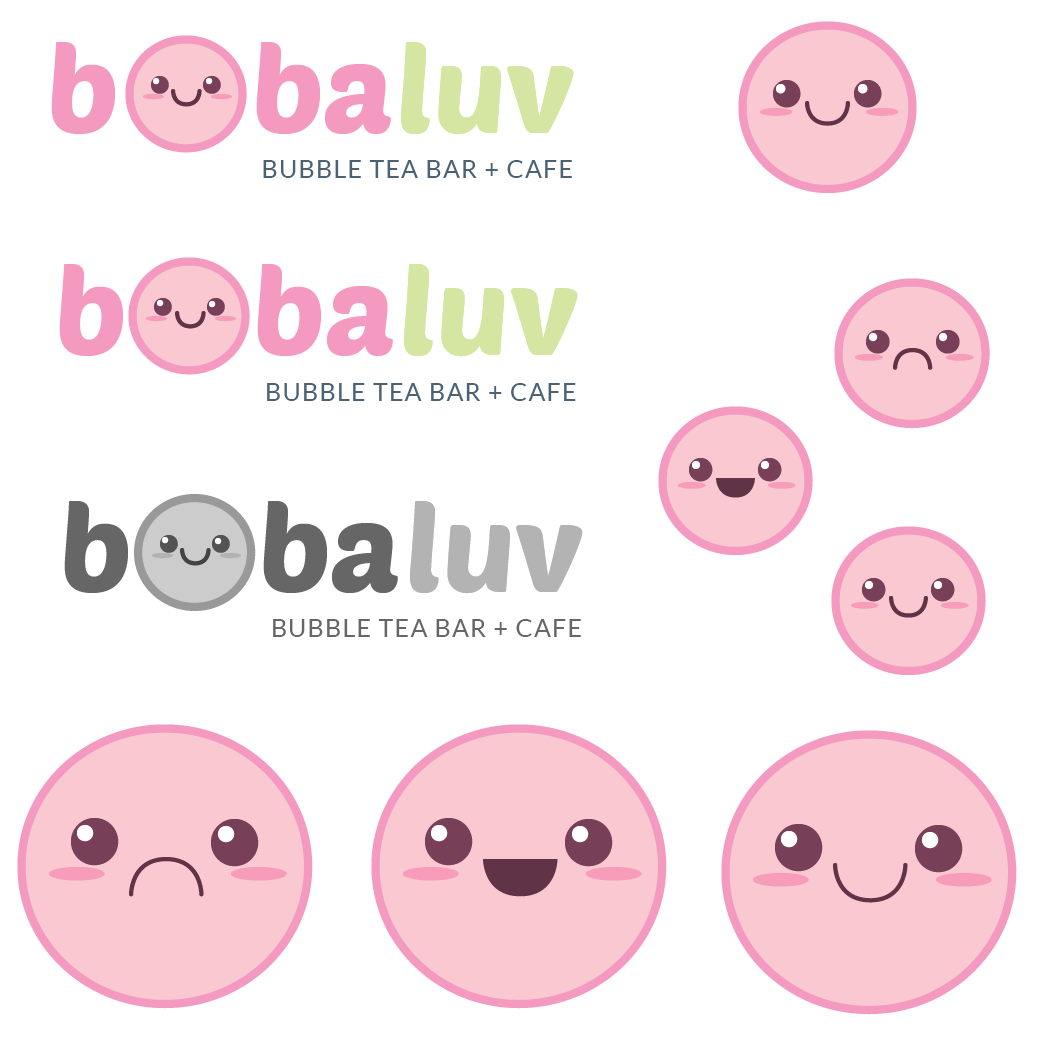
<style>
.page{position:relative;width:1042px;height:1042px;background:#ffffff}
.page>*{position:absolute;margin:0}
.t1{font:122.4px "PoetsenOne-Regular";color:#f49ac1}
.t2{font:122.4px "PoetsenOne-Regular";color:#d5e6a2}
.t3{font:25px "Lato-Regular";letter-spacing:0.05em;color:#4b6174}
.t4{font:122.4px "PoetsenOne-Regular";color:#666666}
.t5{font:122.4px "PoetsenOne-Regular";color:#b3b3b3}
.t6{font:122.4px "PoetsenOne-Regular";color:#b2b2b2}
.t7{font:25px "Lato-Regular";letter-spacing:0.05em;color:#666666}
</style>
<div class="page">
<p class="t1" style="left:51px;top:42px;width:340px;height:92px">b     ba</p>
<p class="t2" style="left:401px;top:42px;width:173px;height:93px">luv</p>
<p class="t2" style="left:401px;top:42px;width:173px;height:93px">luv</p>
<p class="t2" style="left:401px;top:42px;width:173px;height:93px">luv</p>
<p class="t2" style="left:401px;top:42px;width:173px;height:93px">luv</p>
<p class="t3" style="left:263px;top:160px;width:309px;height:18px">BUBBLE TEA BAR + CAFE</p>
<p class="t1" style="left:59px;top:264px;width:334px;height:92px">b     ba</p>
<p class="t2" style="left:404px;top:264px;width:174px;height:93px">luv</p>
<p class="t2" style="left:404px;top:264px;width:174px;height:93px">luv</p>
<p class="t3" style="left:267px;top:383px;width:309px;height:18px">BUBBLE TEA BAR + CAFE</p>
<p class="t4" style="left:64px;top:501px;width:334px;height:92px">b     ba</p>
<p class="t5" style="left:410px;top:501px;width:173px;height:93px">luv</p>
<p class="t6" style="left:410px;top:501px;width:173px;height:93px">luv</p>
<p class="t7" style="left:273px;top:619px;width:308px;height:18px">BUBBLE TEA BAR + CAFE</p>
</div>
